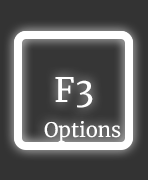
<style>
.page{position:relative;width:148px;height:180px;background:#333333}
.page>*{position:absolute;margin:0}
.t1{font:33.6px "Merriweather-Regular";color:#ffffff}
.t2{font:20px "Merriweather-Regular";color:#ffffff}
</style>
<div class="page">
<p class="t1" style="left:55px;top:77px;width:38px;height:31px">F3</p>
<p class="t2" style="left:44px;top:121px;width:77px;height:21px">Options</p>
</div>
